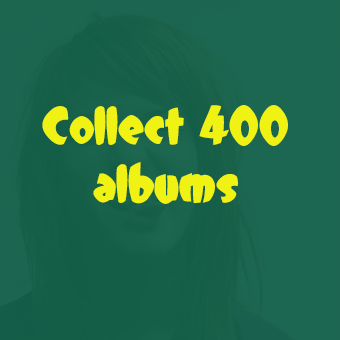
<style>
.page{position:relative;width:340px;height:340px;background:#1c6751}
.page>*{position:absolute;margin:0}
.t1{font:48px "DCC-Dreamer";color:#eff212}
</style>
<div class="page">
<p class="t1" style="left:42px;top:105px;width:246px;height:99px;text-align:center">Collect 400 albums</p>
</div>
